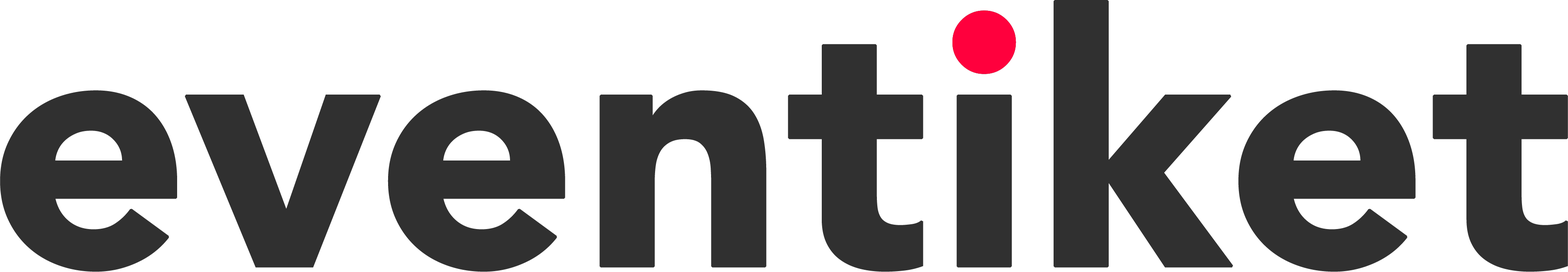
<style>
.page{position:relative;width:1568px;height:272px;background:#ffffff}
.page>*{position:absolute;margin:0}
.t1{font:350.8px "Avenir-Black";color:#303030;font-weight:bold}
</style>
<div class="page">
<p class="t1" style="left:0px;top:0px;width:1568px;height:272px">eventiket</p>
</div>
